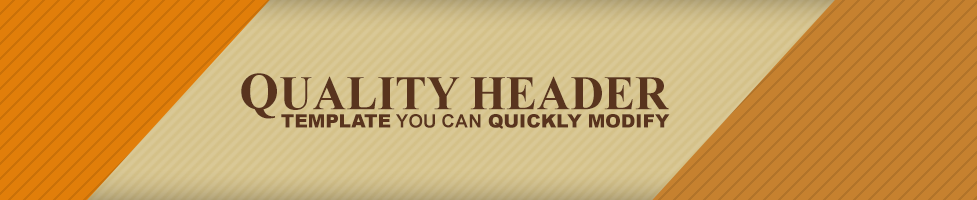
<style>
.page{position:relative;width:977px;height:200px}
.page>*{position:absolute;margin:0}
.t1{font:48px "TimesNewRomanPS-BoldMT";color:#59341e;scale:0.97 1}
.t2{font:53.1px "TimesNewRomanPS-BoldMT";color:#59341e;scale:0.97 1}
.t3{font:18.5px "Arial-Black";letter-spacing:0.005em;color:#59341e;text-transform:uppercase}
.t4{font:18.5px "Arial-BoldMT";letter-spacing:0.005em;color:#59341e;text-transform:uppercase}
</style>
<div class="page">
<p class="t1" style="left:241px;top:73px;width:428px;height:46px"><span class="t2">Q</span>UALITY HEADER</p>
<p class="t3" style="left:281px;top:114px;width:389px;height:15px">Template<span class="t4"> You Can</span> Quickly Modify</p>
</div>
